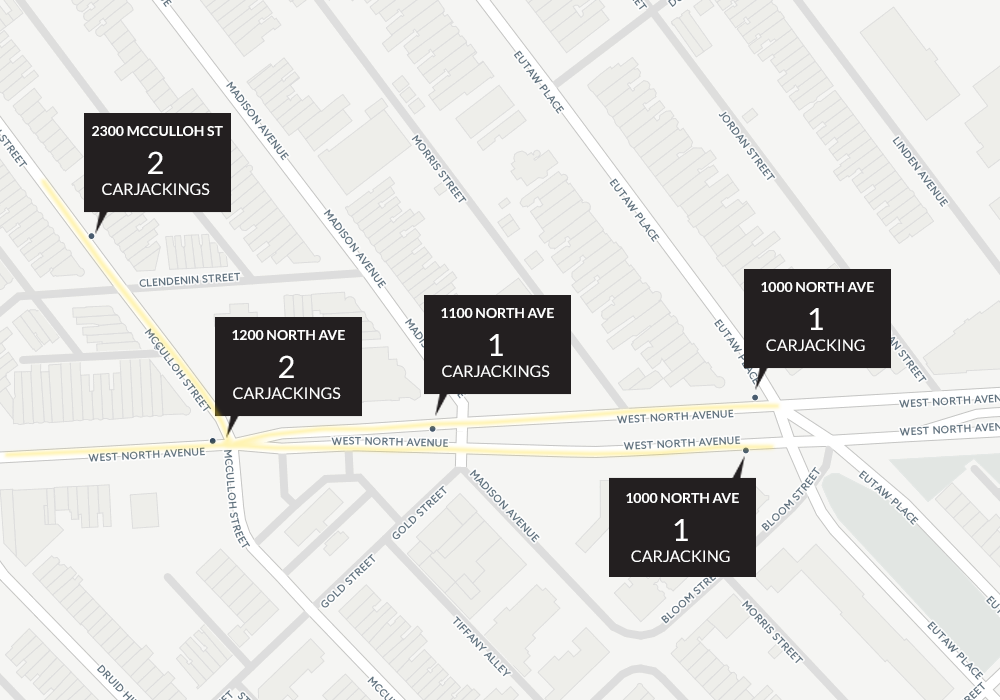
<style>
.page{position:relative;width:1000px;height:700px;background:#f5f5f3}
.page>*{position:absolute;margin:0}
.t1{font:14px "Lato-Bold";color:#ffffff}
.t2{font:16px/21.7px "Lato-Regular";color:#ffffff}
.t3{font:30.8px/21.7px "Lato-Regular";color:#ffffff}
</style>
<div class="page">
<p class="t1" style="left:92px;top:126px;width:131px;height:10px">2300 MCCULLOH ST</p>
<p class="t2" style="left:102px;top:151px;width:108px;height:44px;text-align:center"><span class="t3">2<br></span>CARJACKINGS</p>
<p class="t1" style="left:761px;top:282px;width:113px;height:10px">1000 NORTH AVE</p>
<p class="t1" style="left:441px;top:308px;width:113px;height:10px">1100 NORTH AVE</p>
<p class="t2" style="left:766px;top:308px;width:99px;height:43px;text-align:center"><span class="t3">1<br></span>CARJACKING</p>
<p class="t1" style="left:232px;top:330px;width:113px;height:10px">1200 NORTH AVE</p>
<p class="t2" style="left:442px;top:334px;width:108px;height:43px;text-align:center"><span class="t3">1<br></span>CARJACKINGS</p>
<p class="t2" style="left:233px;top:355px;width:108px;height:44px;text-align:center"><span class="t3">2<br></span>CARJACKINGS</p>
<p class="t1" style="left:626px;top:493px;width:113px;height:10px">1000 NORTH AVE</p>
<p class="t2" style="left:631px;top:519px;width:99px;height:43px;text-align:center"><span class="t3">1<br></span>CARJACKING</p>
</div>
